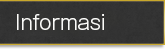
<style>
.page{position:relative;width:165px;height:50px}
.page>*{position:absolute;margin:0}
.t1{font:20px "GothicMB101Pro-Light";color:#fbfbf9}
</style>
<div class="page">
<p class="t1" style="left:17px;top:14px;width:87px;height:16px">Informasi</p>
</div>
